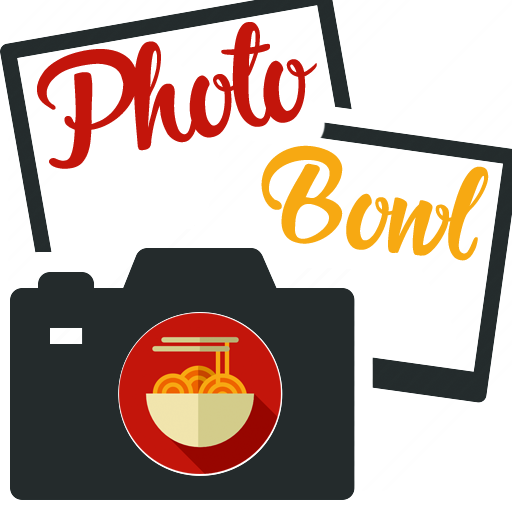
<style>
.page{position:relative;width:512px;height:512px;background:#ffffff}
.page>*{position:absolute;margin:0}
.t1{font:200px "Blanche-de-la-Fontaine";color:#c3150b}
.t2{font:180px "Blanche-de-la-Fontaine";color:#f7a912}
</style>
<div class="page">
<p class="t1" style="left:37px;top:22px;width:280px;height:147px;rotate:-11deg">Photo</p>
<p class="t2" style="left:261px;top:145px;width:228px;height:116px;rotate:6deg">Bowl</p>
</div>
